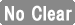
<style>
.page{position:relative;width:75px;height:25px;background:#888888}
.page>*{position:absolute;margin:0}
.t1{font:18px "HGPGothicE";color:#ffffff;font-weight:bold}
</style>
<div class="page">
<p class="t1" style="left:5px;top:5px;width:67px;height:16px">No Clear</p>
</div>
